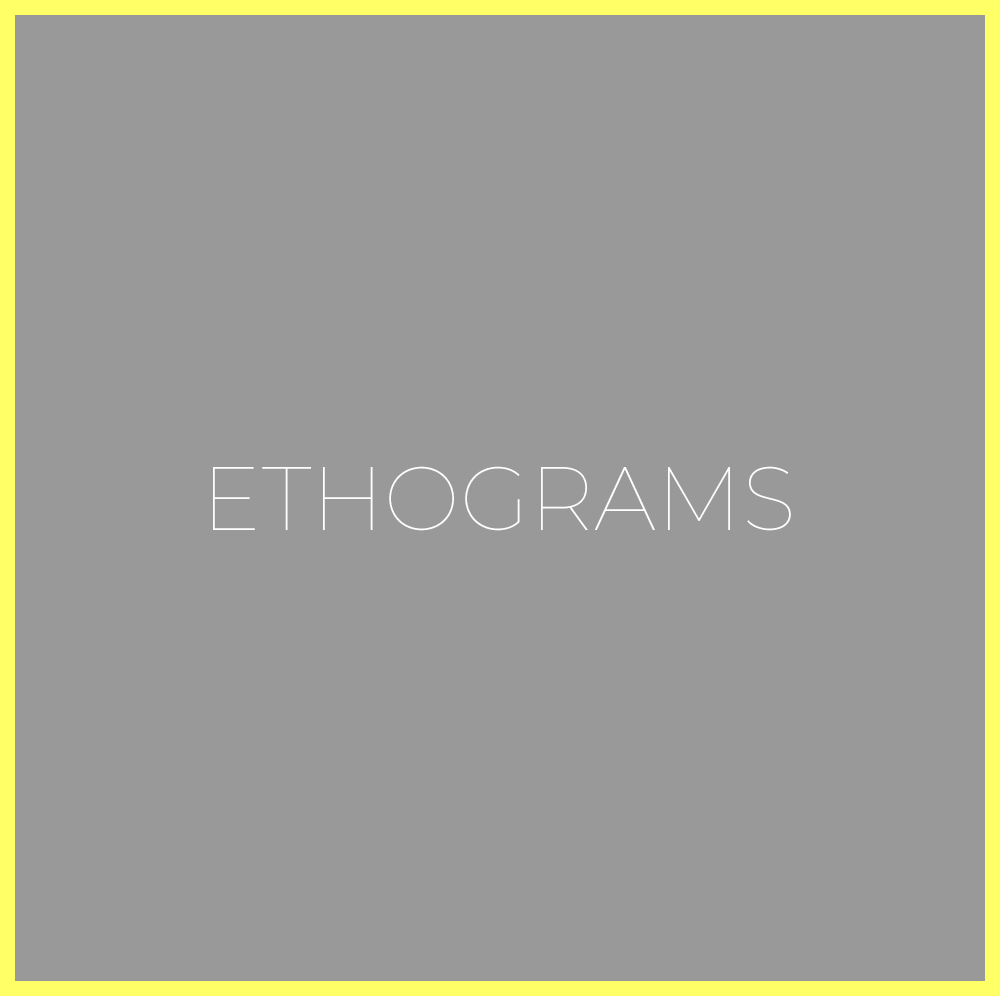
<style>
.page{position:relative;width:1000px;height:996px;background:#999999}
.page>*{position:absolute;margin:0}
.t1{font:90px "Montserrat-Thin";color:#ffffff}
</style>
<div class="page">
<p class="t1" style="left:213px;top:466px;width:578px;height:65px">ETHOGRAMS</p>
</div>
